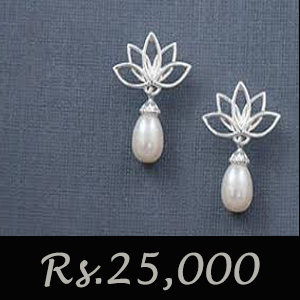
<style>
.page{position:relative;width:300px;height:300px}
.page>*{position:absolute;margin:0}
.t1{font:41.7px "LucidaHandwriting-Italic";color:#b5b4ac}
</style>
<div class="page">
<p class="t1" style="left:41px;top:252px;width:219px;height:39px">Rs.25,000</p>
</div>
